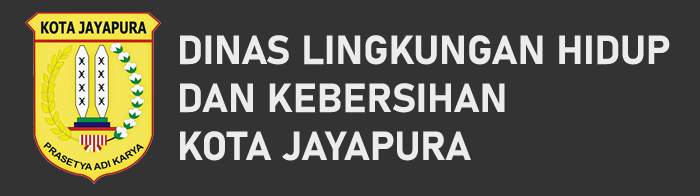
<style>
.page{position:relative;width:700px;height:196px;background:#333333}
.page>*{position:absolute;margin:0}
.t1{font:40px "Bahnschrift-Bold";color:#ececec;font-weight:bold}
</style>
<div class="page">
<p class="t1" style="left:180px;top:35px;width:490px;height:126px">DINAS LINGKUNGAN HIDUP <br>DAN KEBERSIHAN<br>KOTA JAYAPURA</p>
</div>
